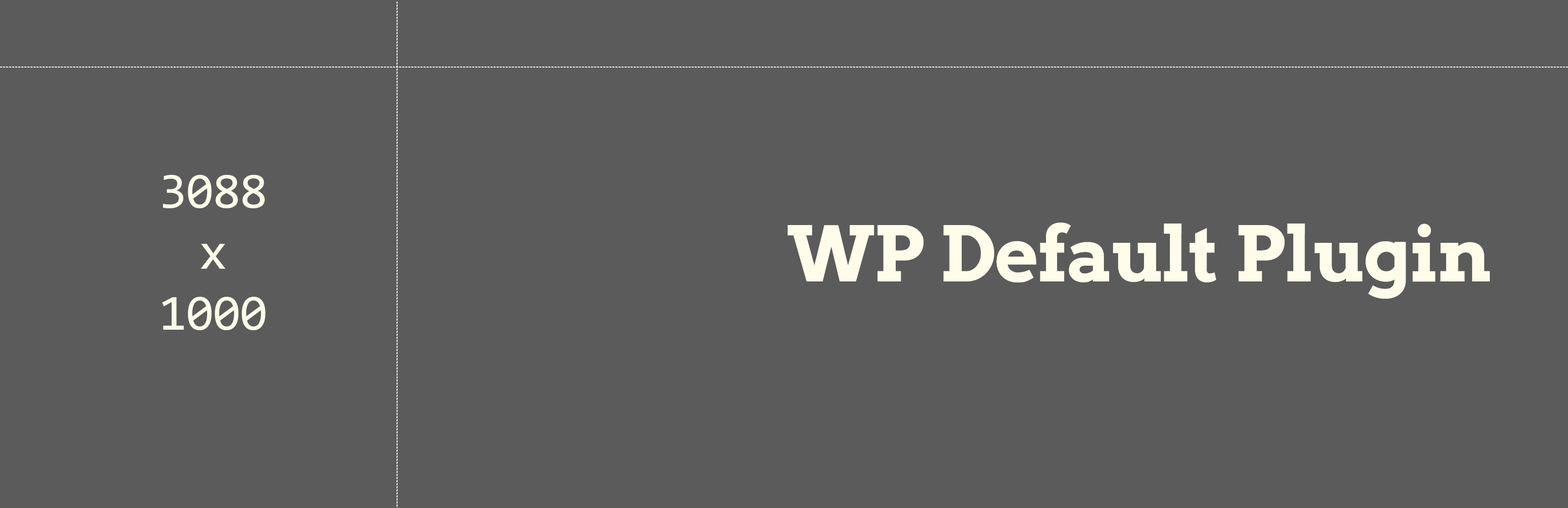
<style>
.page{position:relative;width:1568px;height:508px;background:#5b5b5b}
.page>*{position:absolute;margin:0}
.t1{font:50.8px "Consolas";letter-spacing:-0.02em;color:#fffdea}
.t2{font:76.2px "ArvoGr00FCn";letter-spacing:-0.02em;color:#fffdea}
</style>
<div class="page">
<p class="t1" style="left:162px;top:175px;width:104px;height:155px;text-align:center">3088<br>x<br>1000</p>
<p class="t2" style="left:788px;top:222px;width:702px;height:77px">WP Default Plugin</p>
</div>
